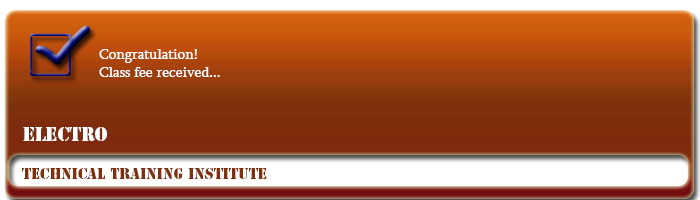
<style>
.page{position:relative;width:700px;height:200px}
.page>*{position:absolute;margin:0}
.t1{font:15px "Sylfaen";color:#ffffff}
.t2{font:18px "StencilStd";color:#ffffff}
.t3{font:14px "StencilStd";color:#7f300d}
</style>
<div class="page">
<p class="t1" style="left:99px;top:49px;width:121px;height:28px">Congratulation!<br>Class fee received...</p>
<p class="t2" style="left:23px;top:127px;width:84px;height:14px">ELECTRO</p>
<p class="t3" style="left:22px;top:168px;width:245px;height:11px">Technical Training Institute</p>
</div>
